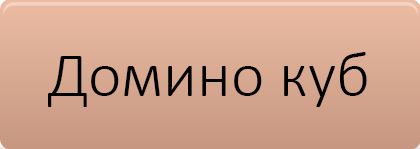
<style>
.page{position:relative;width:420px;height:149px}
.page>*{position:absolute;margin:0}
.t1{font:64px "Calibri-Light";color:#000000}
</style>
<div class="page">
<p class="t1" style="left:48px;top:52px;width:319px;height:55px">Домино куб</p>
</div>
